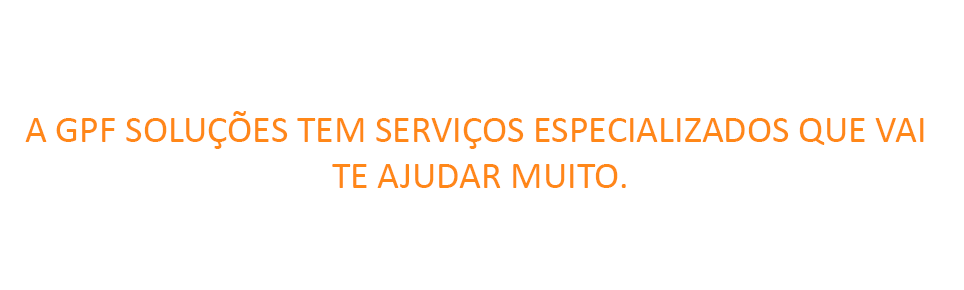
<style>
.page{position:relative;width:964px;height:290px;background:#ffffff}
.page>*{position:absolute;margin:0}
.t1{font:38px "Calibri";color:#ff8718}
</style>
<div class="page">
<p class="t1" style="left:25px;top:111px;width:899px;height:77px;text-align:center">A GPF SOLUÇÕES TEM SERVIÇOS ESPECIALIZADOS QUE VAI <br>TE AJUDAR MUITO.</p>
</div>
